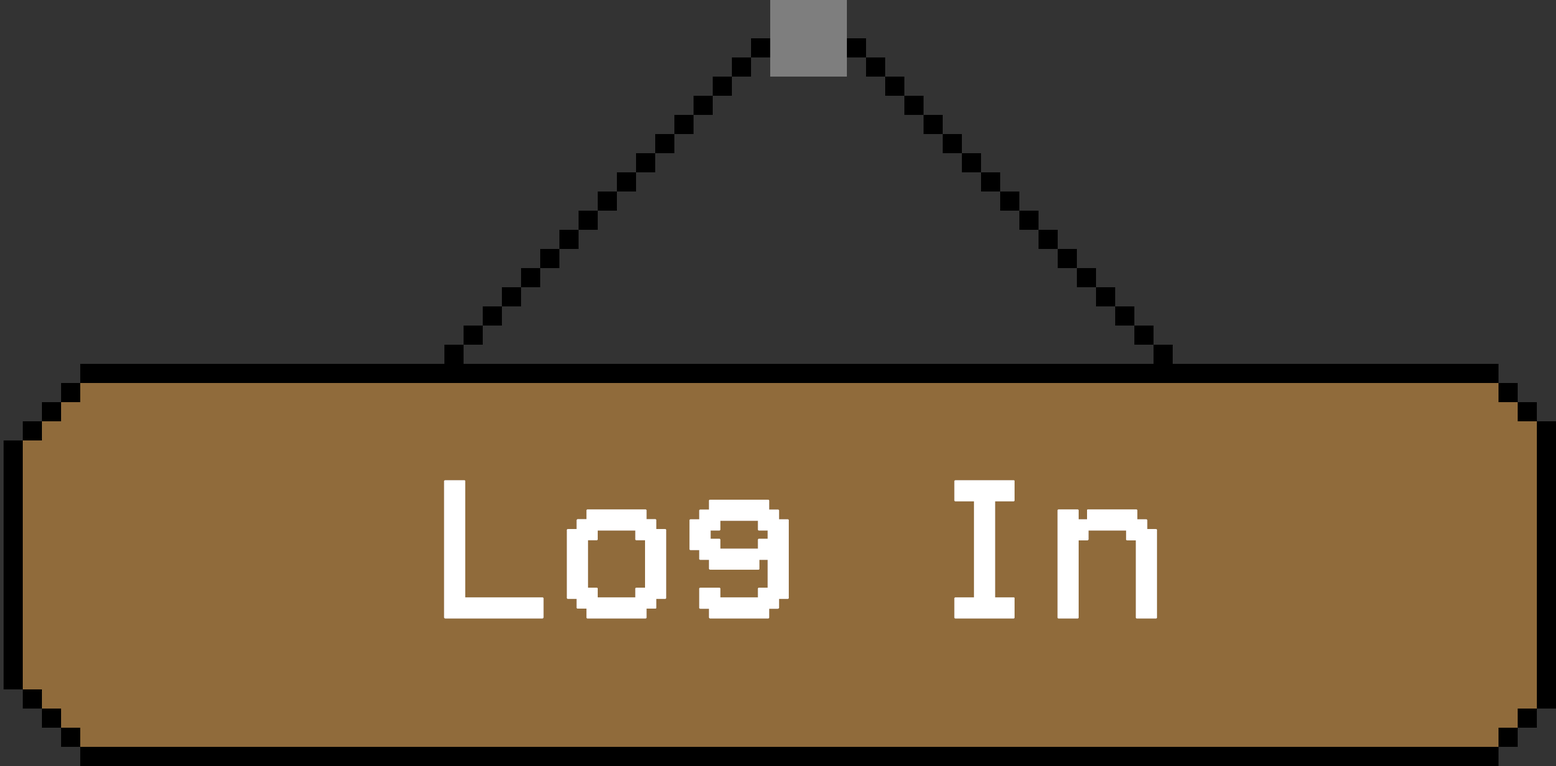
<style>
.page{position:relative;width:1556px;height:766px;background:#333333}
.page>*{position:absolute;margin:0}
.t1{font:200.1px "VCROSDMono";color:#ffffff;font-weight:bold}
</style>
<div class="page">
<p class="t1" style="left:444px;top:480px;width:713px;height:139px">Log In</p>
</div>
